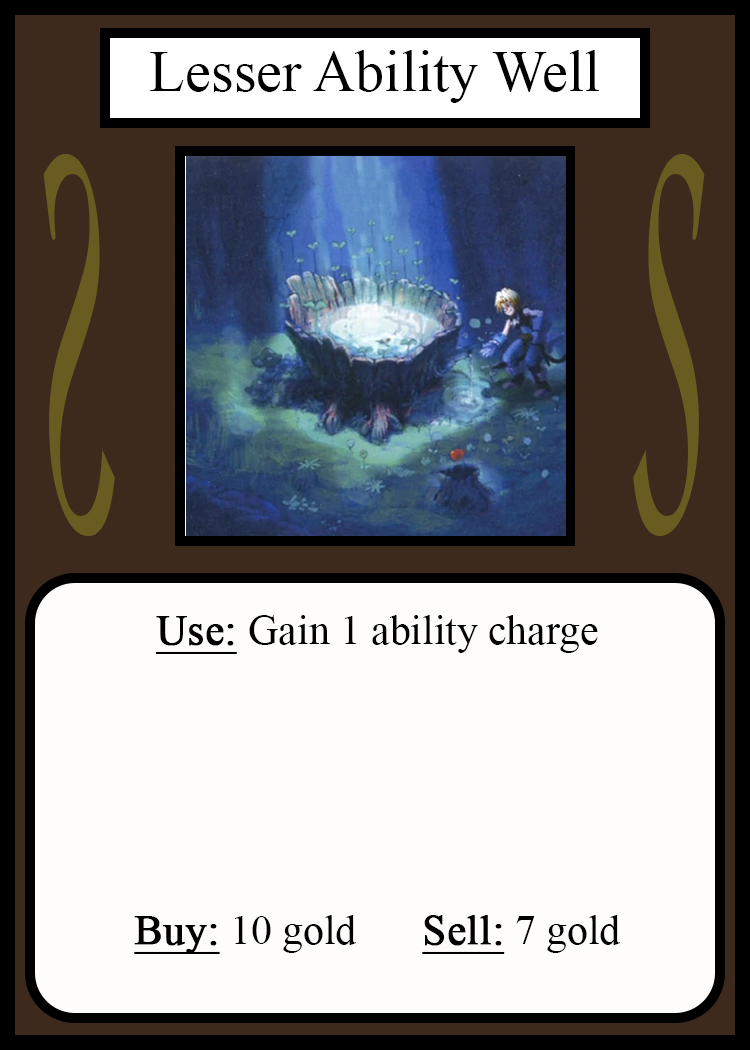
<style>
.page{position:relative;width:750px;height:1050px;background:#fffcfc}
.page>*{position:absolute;margin:0}
.t1{font:58.3px "TimesNewRomanPSMT";color:#010101}
.t2{font:548.5px "Apple-Chancery";color:#6a5c21;scale:0.27 1}
.t3{font:548.2px "Apple-Chancery";color:#6a5c21;scale:0.27 1}
.t4{font:41.7px "TimesNewRomanPSMT";color:#000000}
.t5{font:41.7px "TimesNewRomanPSMT";color:#000000;font-weight:bold;text-decoration:underline}
</style>
<div class="page">
<p class="t1" style="left:150px;top:50px;width:449px;height:53px">Lesser Ability Well</p>
<p class="t2" style="left:43px;top:154px;width:72px;height:382px;rotate:180deg">S</p>
<p class="t3" style="left:633px;top:154px;width:72px;height:382px">S</p>
<p class="t4" style="left:134px;top:615px;width:487px;height:339px;text-align:center"><span class="t5">Use: </span>Gain 1 ability charge<br><br><br><br><br><br><span class="t5">Buy:</span> 10 gold   <span class="t5">Sell:</span> 7 gold</p>
</div>
